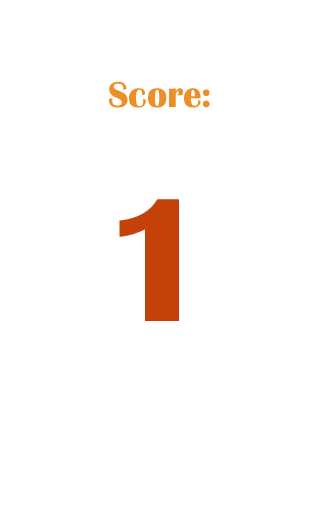
<style>
.page{position:relative;width:320px;height:512px;background:#ffffff}
.page>*{position:absolute;margin:0}
.t1{font:37.4px "BritannicBold";color:#ed8f29}
.t2{font:182.6px "BritannicBold";color:#c44209}
</style>
<div class="page">
<p class="t1" style="left:109px;top:81px;width:101px;height:27px">Score:</p>
<p class="t2" style="left:119px;top:199px;width:60px;height:122px">1</p>
</div>
